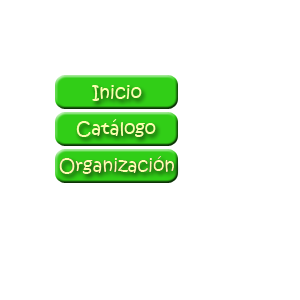
<style>
.page{position:relative;width:300px;height:300px;background:#ffffff}
.page>*{position:absolute;margin:0}
.t1{font:18px "KristenITC-Regular";color:#fbfeae}
</style>
<div class="page">
<p class="t1" style="left:92px;top:85px;width:50px;height:16px">Inicio</p>
<p class="t1" style="left:76px;top:119px;width:80px;height:18px">Catálogo</p>
<p class="t1" style="left:59px;top:156px;width:115px;height:18px">Organización</p>
<p class="t1" style="left:59px;top:156px;width:115px;height:18px">Organización</p>
</div>
